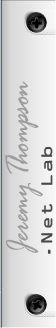
<style>
.page{position:relative;width:56px;height:328px}
.page>*{position:absolute;margin:0}
.t1{font:34px "RageItalic";color:#9b9b9b;scale:0.8 1}
.t2{font:17px "OCRAExtended";color:#494949;scale:1.4 1}
</style>
<div class="page">
<p class="t1" style="left:5px;top:81px;width:38px;height:172px;rotate:-90deg">Jeremy Thompson</p>
<p class="t2" style="left:41px;top:146px;width:12px;height:108px;rotate:-90deg">.Net Lab</p>
</div>
